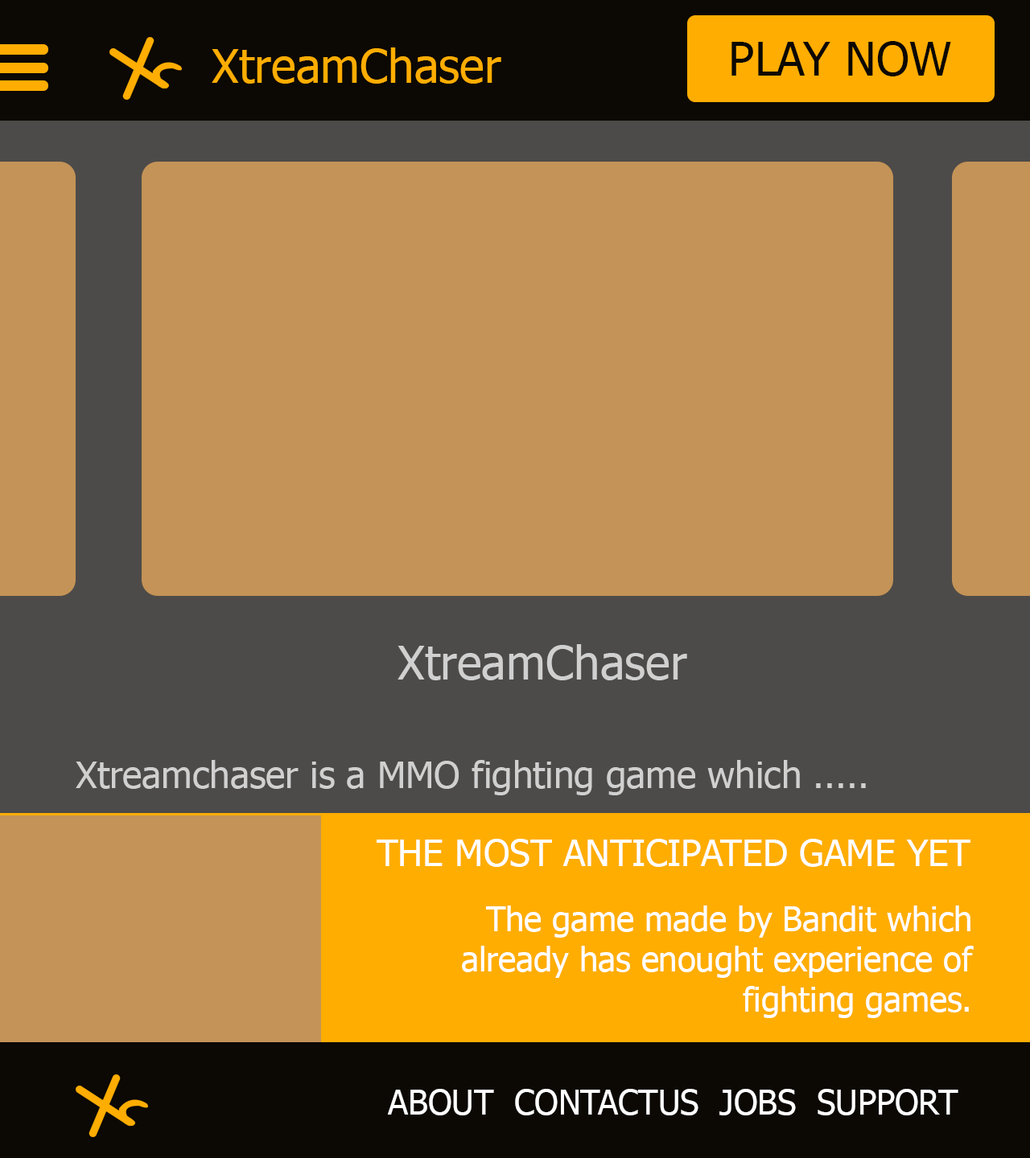
<style>
.page{position:relative;width:1030px;height:1158px;background:#c49357}
.page>*{position:absolute;margin:0}
.t1{font:46.9px "Tahoma";color:#0c0803}
.t2{font:46.9px "Tahoma";color:#ffad01}
.t3{font:46.9px "Tahoma";color:#d0d0d0}
.t4{font:36.9px "Tahoma";color:#d0d0d0}
.t5{font:36.9px "Tahoma";color:#ffffff}
.t6{font:33.5px "Tahoma";color:#ffffff}
</style>
<div class="page">
<p class="t1" style="left:731px;top:41px;width:220px;height:35px">PLAY NOW</p>
<p class="t2" style="left:212px;top:47px;width:289px;height:37px">XtreamChaser</p>
<p class="t3" style="left:397px;top:644px;width:290px;height:36px">XtreamChaser</p>
<p class="t4" style="left:76px;top:760px;width:789px;height:35px">Xtreamchaser is a MMO fighting game which .....</p>
<p class="t5" style="left:376px;top:839px;width:594px;height:28px">THE MOST ANTICIPATED GAME YET</p>
<p class="t6" style="left:462px;top:906px;width:511px;height:112px;text-align:right">The game made by Bandit which<br>already has enought experience of<br>fighting games.</p>
<p class="t6" style="left:387px;top:1089px;width:571px;height:27px">ABOUT  CONTACTUS  JOBS  SUPPORT</p>
</div>
